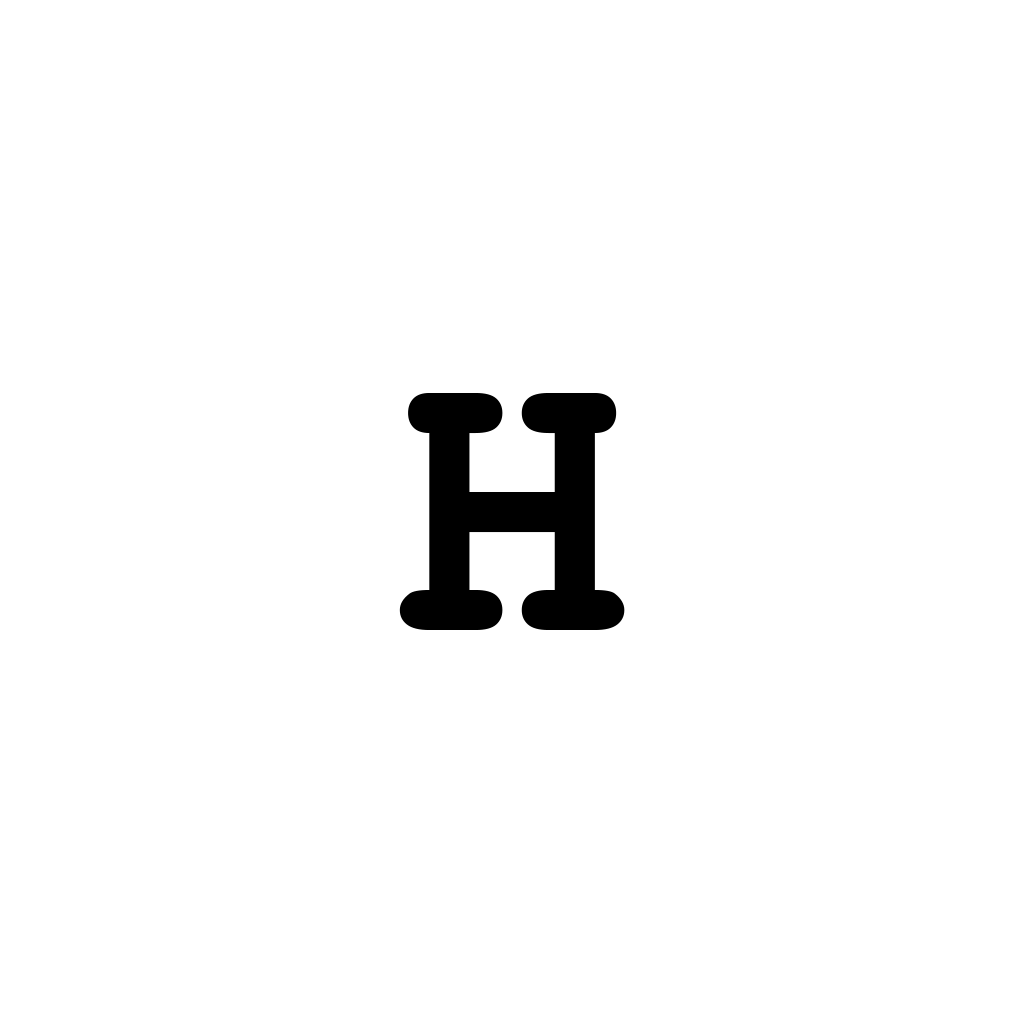
<style>
.page{position:relative;width:1024px;height:1024px;background:#ffffff}
.page>*{position:absolute;margin:0}
.t1{font:400px "CourierNewPS-BoldMT";color:#000000}
</style>
<div class="page">
<p class="t1" style="left:399px;top:393px;width:226px;height:237px">H</p>
</div>
